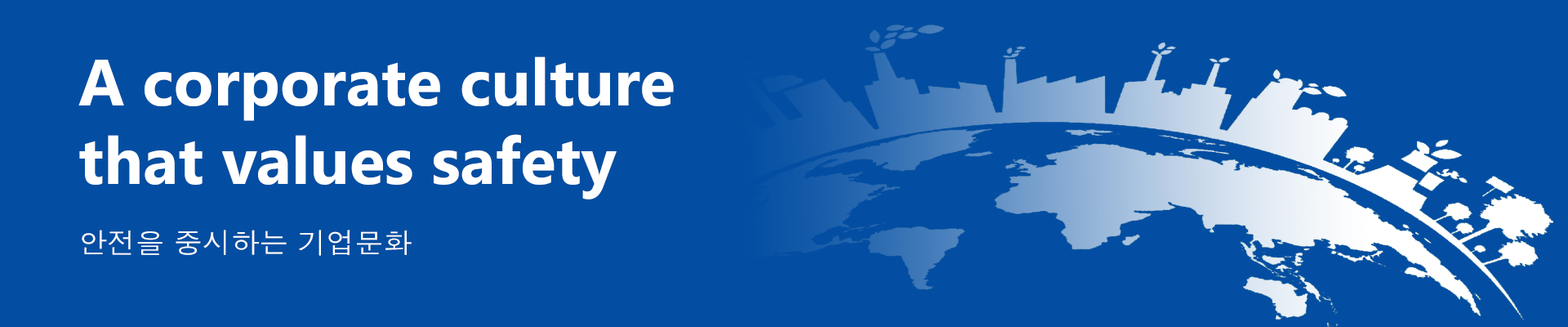
<style>
.page{position:relative;width:1568px;height:327px;background:#034ea2}
.page>*{position:absolute;margin:0}
.t1{font:65.3px "SegoeUI-Bold";color:#ffffff}
.t2{font:28.6px "Dotum";color:#ffffff}
</style>
<div class="page">
<p class="t1" style="left:78px;top:56px;width:596px;height:143px">A corporate culture <br>that values safety</p>
<p class="t2" style="left:82px;top:229px;width:330px;height:27px">안전을 중시하는 기업문화</p>
</div>
